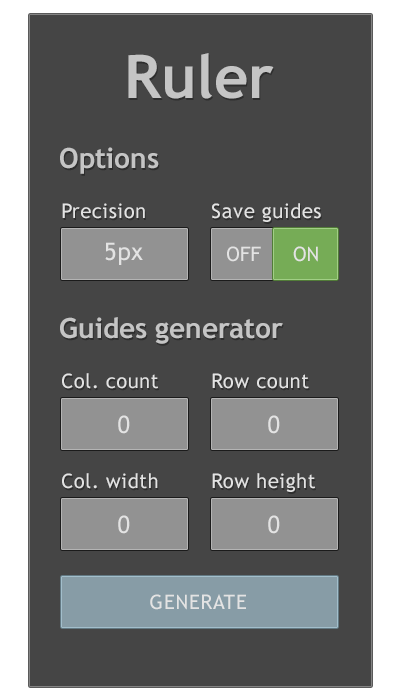
<style>
.page{position:relative;width:400px;height:700px;background:#454545}
.page>*{position:absolute;margin:0}
.t1{font:60px "TrebuchetMS-Bold";color:#c5c5c5}
.t2{font:28px "TrebuchetMS-Bold";color:#c5c5c5}
.t3{font:20px "TrebuchetMS";letter-spacing:0.025em;color:#e3e3e3}
.t4{font:24px "TrebuchetMS";letter-spacing:0.025em;color:#e3e3e3}
</style>
<div class="page">
<p class="t1" style="left:128px;top:53px;width:146px;height:46px">Ruler</p>
<p class="t2" style="left:60px;top:147px;width:99px;height:27px">Options</p>
<p class="t3" style="left:62px;top:203px;width:83px;height:16px">Precision</p>
<p class="t3" style="left:212px;top:203px;width:109px;height:19px">Save guides</p>
<p class="t4" style="left:105px;top:242px;width:38px;height:23px">5px</p>
<p class="t3" style="left:227px;top:246px;width:34px;height:16px">OFF</p>
<p class="t3" style="left:293px;top:246px;width:25px;height:16px">ON</p>
<p class="t2" style="left:60px;top:317px;width:223px;height:27px">Guides generator</p>
<p class="t3" style="left:62px;top:373px;width:96px;height:16px">Col. count</p>
<p class="t3" style="left:212px;top:373px;width:97px;height:16px">Row count</p>
<p class="t4" style="left:118px;top:415px;width:12px;height:19px">0</p>
<p class="t4" style="left:268px;top:415px;width:12px;height:19px">0</p>
<p class="t3" style="left:62px;top:473px;width:96px;height:16px">Col. width</p>
<p class="t3" style="left:212px;top:473px;width:103px;height:19px">Row height</p>
<p class="t4" style="left:118px;top:515px;width:12px;height:19px">0</p>
<p class="t4" style="left:268px;top:515px;width:12px;height:19px">0</p>
<p class="t3" style="left:150px;top:594px;width:96px;height:16px">GENERATE</p>
</div>
